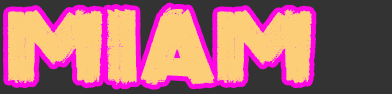
<style>
.page{position:relative;width:392px;height:94px;background:#333333}
.page>*{position:absolute;margin:0}
.t1{font:122.4px "SinisterBlack-Regular";letter-spacing:-0.02em;color:#fcce77}
</style>
<div class="page">
<p class="t1" style="left:7px;top:7px;width:305px;height:78px">miam</p>
</div>
